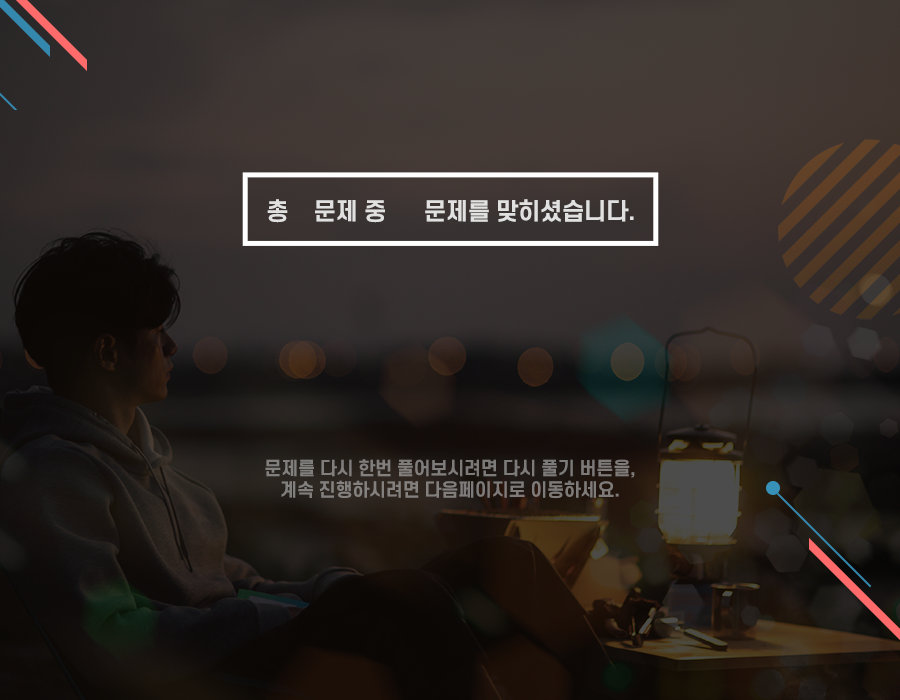
<style>
.page{position:relative;width:900px;height:700px}
.page>*{position:absolute;margin:0}
.t1{font:23.5px "S-CoreDream-6Bold";letter-spacing:-0.025em;color:#e1e0e0}
.t2{font:18px "S-CoreDream-6Bold";letter-spacing:-0.025em;color:#7f7c7b}
</style>
<div class="page">
<p class="t1" style="left:267px;top:199px;width:367px;height:24px">총    문제 중      문제를 맞히셨습니다.</p>
<p class="t2" style="left:265px;top:459px;width:370px;height:40px;text-align:center">문제를 다시 한번 풀어보시려면 다시 풀기 버튼을,<br>계속 진행하시려면 다음페이지로 이동하세요.</p>
</div>
